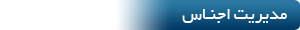
<style>
.page{position:relative;width:300px;height:30px;background:#ffffff}
.page>*{position:absolute;margin:0}
.t1{font:18.3px "BYekan";color:#ffffff}
</style>
<div class="page">
<p class="t1" style="left:182px;top:9px;width:105px;height:14px">مدیریت اجنـاس</p>
</div>
